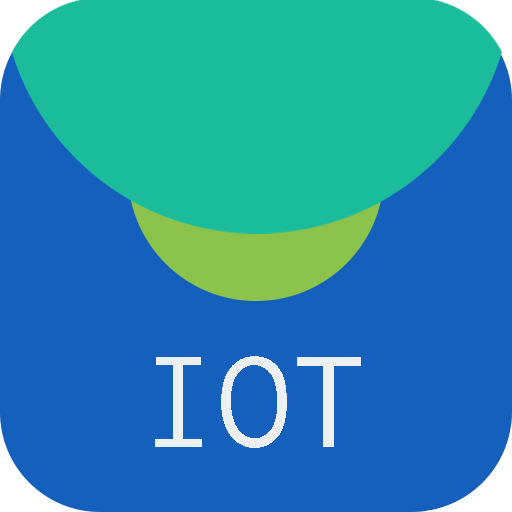
<style>
.page{position:relative;width:512px;height:512px;background:#1560bd}
.page>*{position:absolute;margin:0}
.t1{font:144px "InconsolataForPowerline";color:#ecf0f1;scale:1.03 1}
</style>
<div class="page">
<p class="t1" style="left:155px;top:356px;width:206px;height:92px">IOT</p>
</div>
